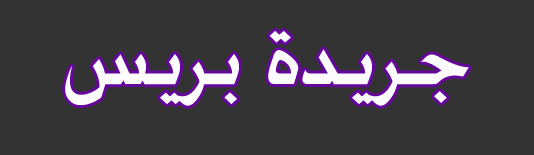
<style>
.page{position:relative;width:534px;height:155px;background:#333333}
.page>*{position:absolute;margin:0}
.t1{font:110px "CopperplateGothic-Bold";color:#fcfcfc}
</style>
<div class="page">
<p class="t1" style="left:65px;top:31px;width:404px;height:75px">جريدة بريس</p>
</div>
